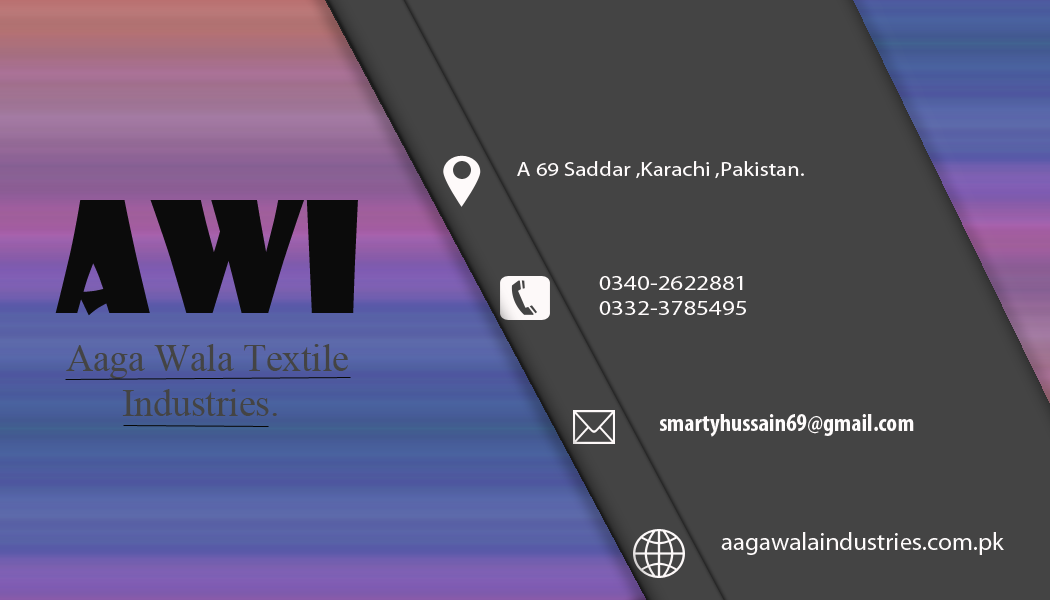
<style>
.page{position:relative;width:1050px;height:600px;background:#444444}
.page>*{position:absolute;margin:0}
.t1{font:20.2px "MyriadPro-Regular";color:#fefbfb;scale:1.13 1}
.t2{font:150px "ShowcardGothic-Reg";color:#0b0b0b}
.t3{font:20.8px "MyriadPro-Regular";color:#fefbfb;scale:1.2 1}
.t4{font:25px "MyriadPro-BoldCond";color:#fefbfb}
.t5{font:25px "MyriadPro-Regular";color:#fefbfb}
</style>
<div class="page">
<p class="t1" style="left:517px;top:161px;width:287px;height:18px">A 69 Saddar ,Karachi ,Pakistan.</p>
<p class="t2" style="left:55px;top:200px;width:303px;height:116px">AWI</p>
<p class="t3" style="left:599px;top:276px;width:147px;height:39px">0340-2622881<br>0332-3785495</p>
<p class="t4" style="left:659px;top:414px;width:255px;height:23px">smartyhussain69@gmail.com</p>
<p class="t5" style="left:721px;top:532px;width:283px;height:23px">aagawalaindustries.com.pk</p>
</div>
